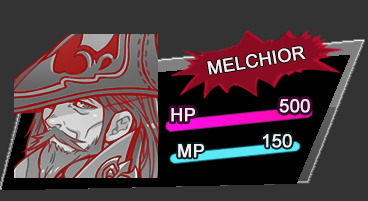
<style>
.page{position:relative;width:368px;height:201px;background:#333333}
.page>*{position:absolute;margin:0}
.t1{font:18px "ArialMT";color:#f8eef0;text-transform:uppercase;font-weight:bold}
</style>
<div class="page">
<p class="t1" style="left:207px;top:46px;width:99px;height:29px;rotate:-10deg">Melchior</p>
<p class="t1" style="left:279px;top:99px;width:31px;height:14px">500</p>
<p class="t1" style="left:171px;top:108px;width:24px;height:14px">HP</p>
<p class="t1" style="left:263px;top:134px;width:29px;height:14px">150</p>
<p class="t1" style="left:178px;top:144px;width:26px;height:14px">MP</p>
</div>
